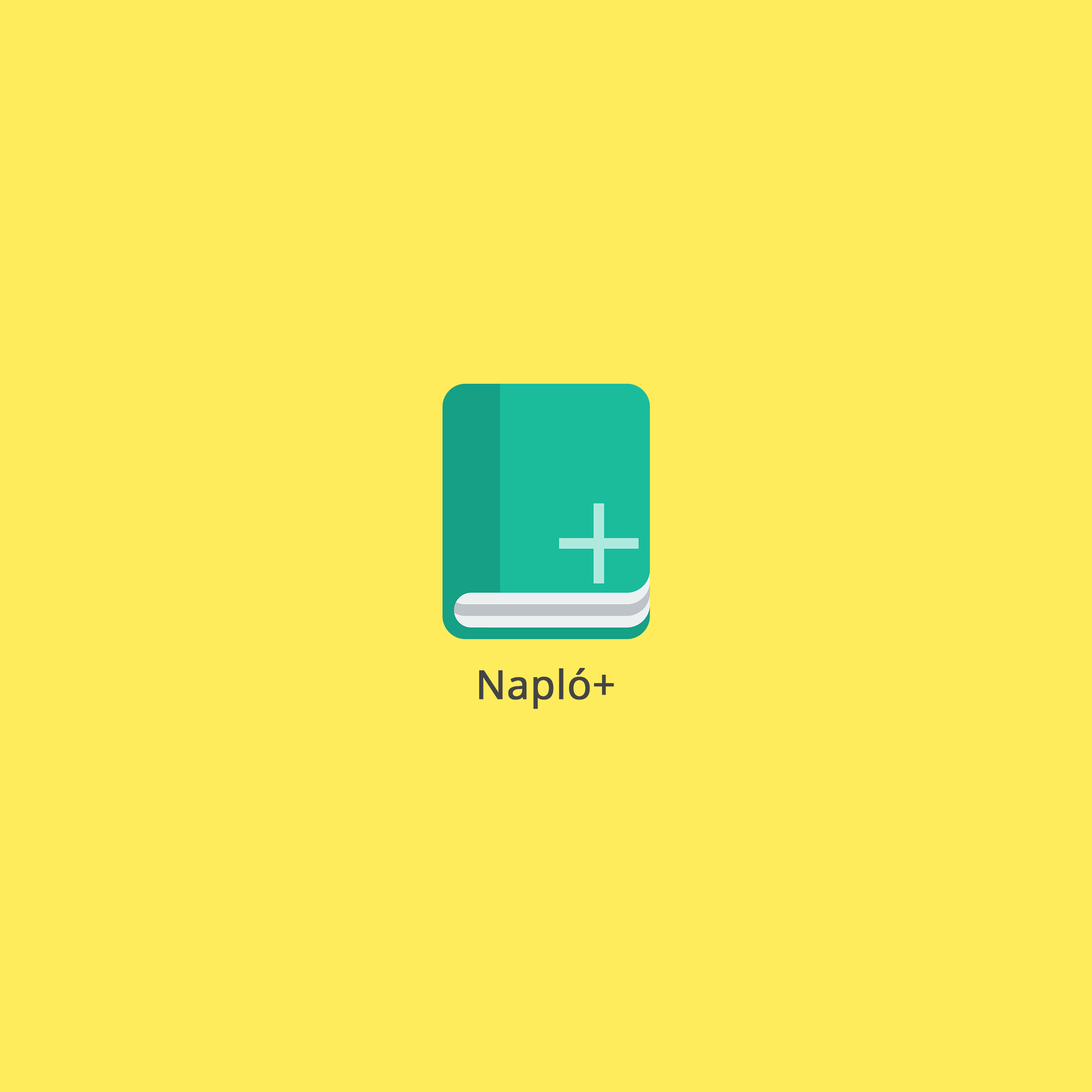
<style>
.page{position:relative;width:1092px;height:1092px;background:#feec5d}
.page>*{position:absolute;margin:0}
.t1{font:40px "OpenSans";color:#444444;font-weight:bold}
</style>
<div class="page">
<p class="t1" style="left:479px;top:668px;width:135px;height:41px">Napló+</p>
</div>
